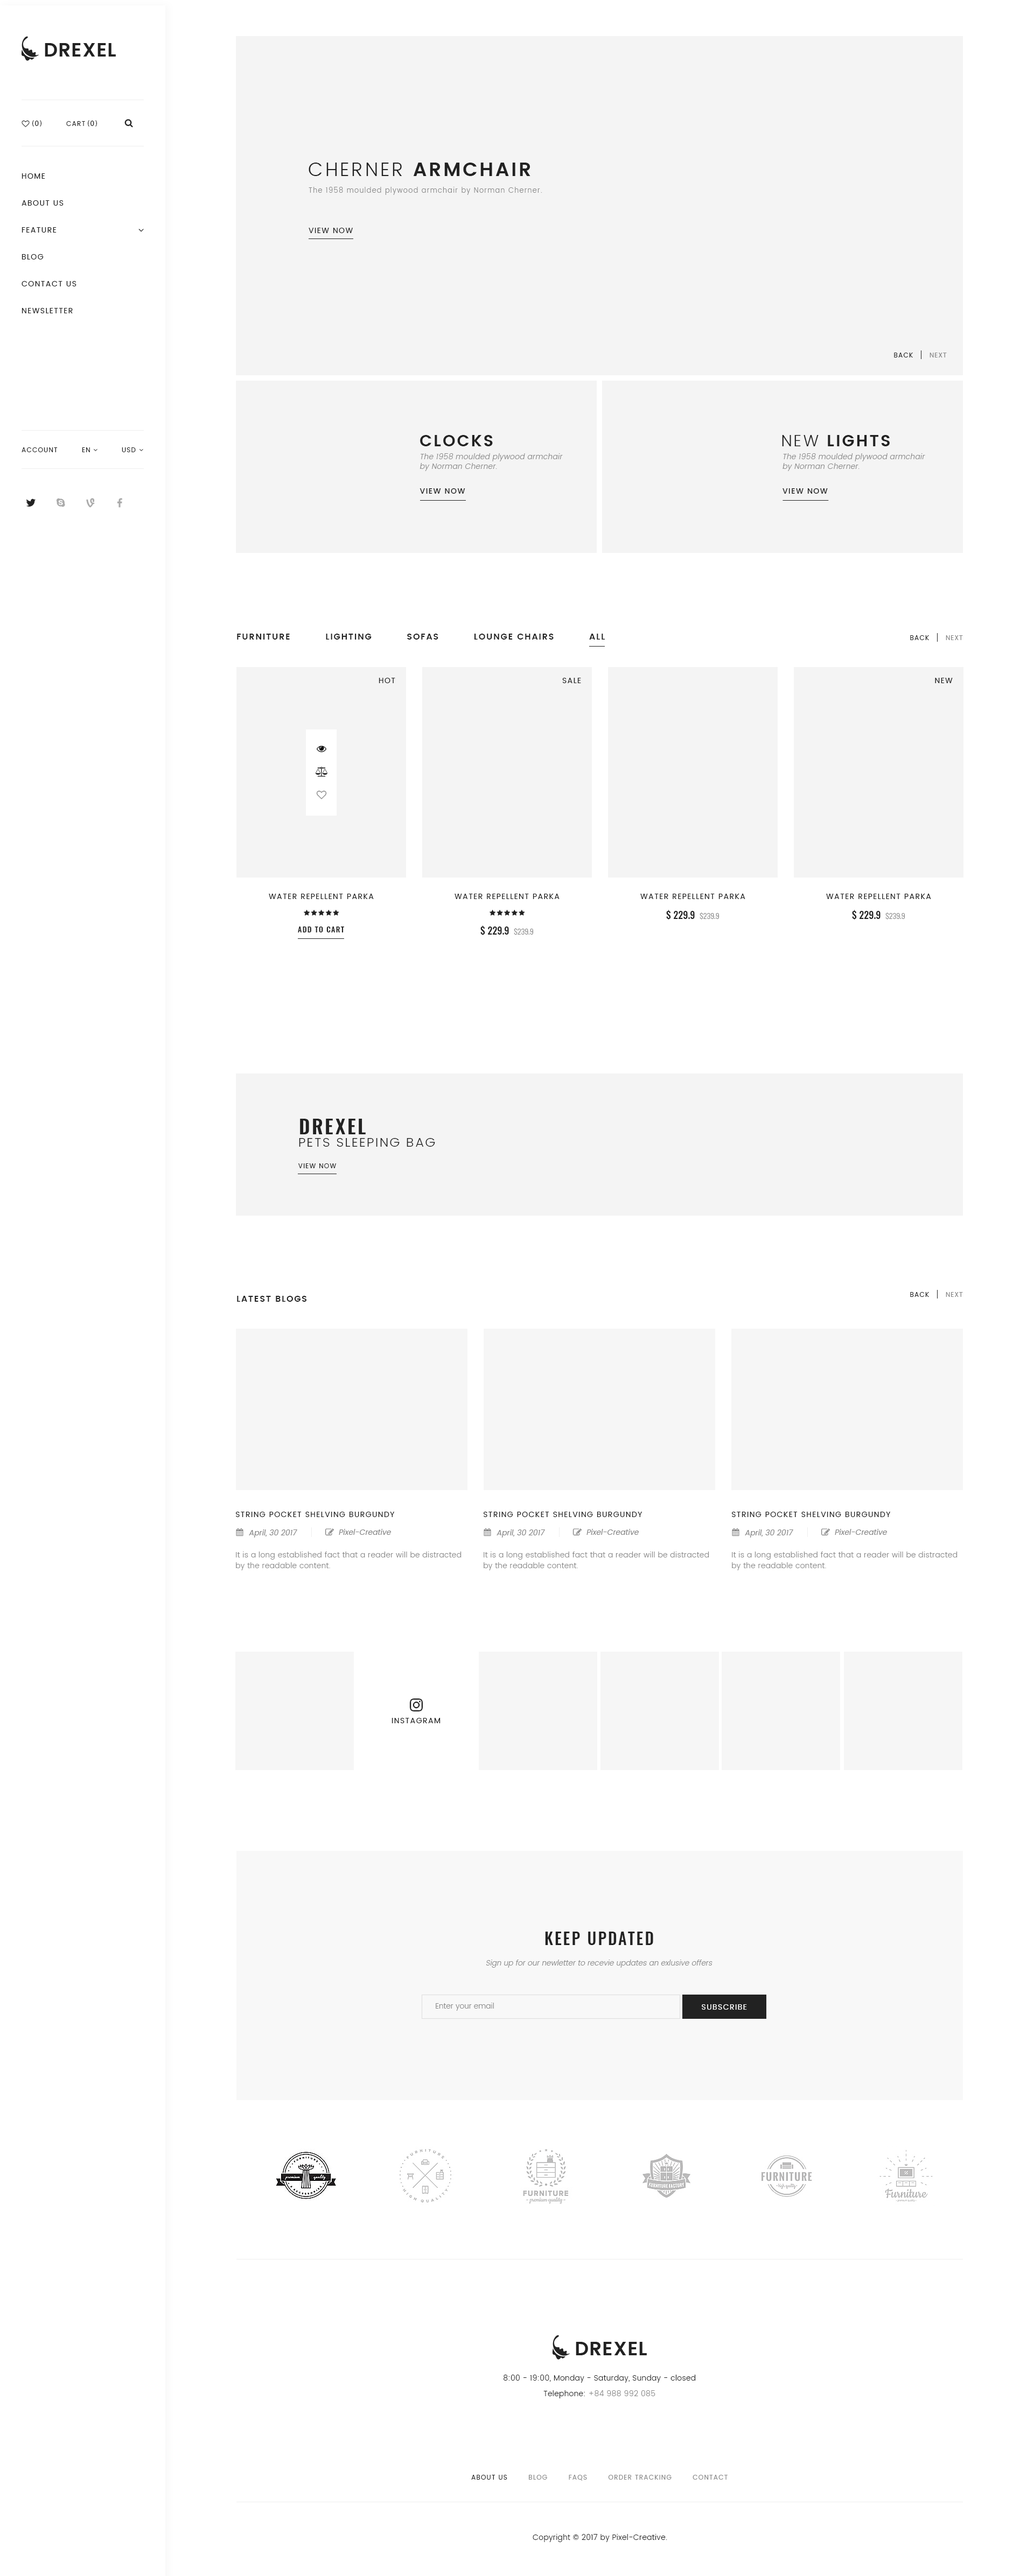
<style>
.page{position:relative;width:1034px;height:2576px;background:#ffffff}
.page>*{position:absolute;margin:0}
.t1{font:7.5px "MyriadPro-Regular";letter-spacing:0.1em;color:#222222;text-transform:uppercase}
.t2{font:6.5px "Poppins-Regular";letter-spacing:0.1em;color:#222222;text-transform:uppercase}
.t3{font:7.5px/26.9px "Poppins-Regular";letter-spacing:0.1em;color:#222222;text-transform:uppercase}
.t4{font:19.4px "Poppins-SemiBold";letter-spacing:0.1em;color:#222222;text-transform:uppercase}
.t5{font:19.4px "Poppins-Light";letter-spacing:0.1em;color:#222222;text-transform:uppercase}
.t6{font:7px "Poppins-Light";letter-spacing:0.1em;color:#888888}
.t7{font:7.5px "Poppins-Regular";letter-spacing:0.1em;color:#222222;text-transform:uppercase}
.t8{font:6.5px "MyriadPro-Regular";letter-spacing:0.1em;color:#888888;text-transform:uppercase}
.t9{font:6.5px "Poppins-Regular";letter-spacing:0.1em;color:#888888;text-transform:uppercase}
.t10{font:16.2px "Poppins-SemiBold";letter-spacing:0.1em;color:#222222;text-transform:uppercase}
.t11{font:16.2px "Poppins-Light";letter-spacing:0.1em;color:#222222;text-transform:uppercase}
.t12{font:6.5px "Poppins-Regular";letter-spacing:0.1em;color:#222222}
.t13{font:7.5px/9.7px "Poppins-Light";letter-spacing:0.025em;color:#888888;font-style:italic}
.t14{font:7.5px "Poppins-Medium";letter-spacing:0.1em;color:#222222;text-transform:uppercase}
.t15{font:8.6px "Poppins-SemiBold";letter-spacing:0.1em;color:#222222;text-transform:uppercase}
.t16{font:9.7px "Oswald-Medium";color:#222222}
.t17{font:7.5px "Oswald-Light";color:#888888}
.t18{font:7.5px "Oswald-Medium";letter-spacing:0.1em;color:#222222;text-transform:uppercase}
.t19{font:19.4px "Oswald-DemiBold";letter-spacing:0.1em;color:#222222;text-transform:uppercase}
.t20{font:12.9px "Poppins-Light";letter-spacing:0.1em;color:#222222;text-transform:uppercase}
.t21{font:7.5px "Poppins-Regular";color:#888888;font-style:italic}
.t22{font:7.5px/10.8px "Poppins-Light";letter-spacing:0.025em;color:#888888}
.t23{font:16.2px "Oswald-Medium";letter-spacing:0.1em;color:#222222}
.t24{font:7.5px "Poppins-Light";color:#888888;font-style:italic}
.t25{font:7.5px "Poppins-Light";color:#888888}
.t26{font:7.5px "Poppins-Regular";letter-spacing:0.1em;color:#ffffff;text-transform:uppercase}
.t27{font:7.5px "Poppins-Light";letter-spacing:0.025em;color:#222222}
.t28{font:7.5px "Poppins-Light";letter-spacing:0.025em;color:#888888}
</style>
<div class="page">
<p class="t1" style="left:32px;top:120px;width:9px;height:7px">(0)</p>
<p class="t2" style="left:66px;top:121px;width:19px;height:5px">Cart</p>
<p class="t1" style="left:88px;top:120px;width:9px;height:7px">(0)</p>
<p class="t3" style="left:22px;top:173px;width:54px;height:140px">Home<br>about us<br>Feature<br>Blog<br>contact us<br>newsletter</p>
<p class="t4" style="left:308px;top:163px;width:222px;height:13px"><span class="t5">Cherner </span>Armchair</p>
<p class="t6" style="left:308px;top:187px;width:234px;height:8px">The 1958 moulded plywood armchair by Norman Cherner.</p>
<p class="t7" style="left:308px;top:228px;width:45px;height:5px">View now</p>
<p class="t2" style="left:894px;top:353px;width:19px;height:4px">Back</p>
<p class="t8" style="left:929px;top:353px;width:17px;height:4px"><span class="t9">N</span>ext</p>
<p class="t10" style="left:420px;top:435px;width:73px;height:11px">Clocks</p>
<p class="t10" style="left:782px;top:435px;width:107px;height:11px"><span class="t11">New</span> Lights</p>
<p class="t2" style="left:22px;top:447px;width:36px;height:5px">Account</p>
<p class="t12" style="left:82px;top:447px;width:8px;height:5px">EN</p>
<p class="t12" style="left:122px;top:447px;width:14px;height:5px">USD</p>
<p class="t13" style="left:419px;top:453px;width:144px;height:18px">The 1958 moulded plywood armchair<br>by Norman Cherner.</p>
<p class="t13" style="left:782px;top:453px;width:143px;height:18px">The 1958 moulded plywood armchair<br>by Norman Cherner.</p>
<p class="t14" style="left:419px;top:488px;width:46px;height:6px">View now</p>
<p class="t14" style="left:782px;top:488px;width:45px;height:6px">View now</p>
<p class="t15" style="left:237px;top:634px;width:368px;height:6px">Furniture          Lighting          Sofas          Lounge Chairs          All</p>
<p class="t2" style="left:910px;top:635px;width:19px;height:5px">Back</p>
<p class="t8" style="left:945px;top:635px;width:18px;height:5px"><span class="t9">N</span>ext</p>
<p class="t7" style="left:378px;top:678px;width:17px;height:5px">Hot</p>
<p class="t7" style="left:562px;top:678px;width:19px;height:5px">SAle</p>
<p class="t7" style="left:935px;top:678px;width:17px;height:5px">New</p>
<p class="t7" style="left:269px;top:894px;width:105px;height:5px">Water Repellent Parka</p>
<p class="t7" style="left:454px;top:894px;width:105px;height:5px">Water Repellent Parka</p>
<p class="t7" style="left:640px;top:894px;width:105px;height:5px">Water Repellent Parka</p>
<p class="t7" style="left:826px;top:894px;width:105px;height:5px">Water Repellent Parka</p>
<p class="t16" style="left:666px;top:910px;width:53px;height:10px">$ 229.9  <span class="t17">$239.9</span></p>
<p class="t16" style="left:852px;top:910px;width:53px;height:10px">$ 229.9  <span class="t17">$239.9</span></p>
<p class="t18" style="left:298px;top:926px;width:46px;height:6px">Add to cart</p>
<p class="t16" style="left:480px;top:925px;width:54px;height:11px">$ 229.9  <span class="t17">$239.9</span></p>
<p class="t19" style="left:300px;top:1119px;width:66px;height:15px">Drexel</p>
<p class="t20" style="left:299px;top:1138px;width:136px;height:9px">Pets Sleeping bag</p>
<p class="t2" style="left:298px;top:1163px;width:38px;height:5px">View now</p>
<p class="t15" style="left:237px;top:1296px;width:69px;height:6px">Latest Blogs</p>
<p class="t2" style="left:910px;top:1292px;width:19px;height:5px">Back</p>
<p class="t8" style="left:945px;top:1292px;width:18px;height:5px"><span class="t9">N</span>ext</p>
<p class="t7" style="left:236px;top:1512px;width:159px;height:5px">String Pocket Shelving Burgundy</p>
<p class="t7" style="left:483px;top:1512px;width:159px;height:5px">String Pocket Shelving Burgundy</p>
<p class="t7" style="left:732px;top:1512px;width:158px;height:5px">String Pocket Shelving Burgundy</p>
<p class="t21" style="left:249px;top:1529px;width:48px;height:9px">April, 30 2017</p>
<p class="t21" style="left:339px;top:1529px;width:52px;height:6px">Pixel-Creative</p>
<p class="t21" style="left:496px;top:1529px;width:49px;height:9px">April, 30 2017</p>
<p class="t21" style="left:586px;top:1529px;width:52px;height:6px">Pixel-Creative</p>
<p class="t21" style="left:745px;top:1529px;width:48px;height:9px">April, 30 2017</p>
<p class="t21" style="left:834px;top:1529px;width:53px;height:6px">Pixel-Creative</p>
<p class="t22" style="left:236px;top:1552px;width:225px;height:18px">It is a long established fact that a reader will be distracted by the readable content.</p>
<p class="t22" style="left:483px;top:1552px;width:226px;height:18px">It is a long established fact that a reader will be distracted by the readable content.</p>
<p class="t22" style="left:732px;top:1552px;width:225px;height:18px">It is a long established fact that a reader will be distracted by the readable content.</p>
<p class="t7" style="left:391px;top:1718px;width:49px;height:5px">Instagram</p>
<p class="t23" style="left:545px;top:1932px;width:108px;height:13px">KEEP UPDATED</p>
<p class="t24" style="left:486px;top:1960px;width:226px;height:8px">Sign up for our newletter to recevie updates an exlusive offers</p>
<p class="t25" style="left:436px;top:2003px;width:58px;height:8px">Enter your email</p>
<p class="t26" style="left:701px;top:2004px;width:46px;height:6px">Subscribe</p>
<p class="t27" style="left:503px;top:2375px;width:193px;height:8px">8:00 - 19:00, Monday - Saturday, Sunday - closed</p>
<p class="t28" style="left:543px;top:2390px;width:112px;height:8px"><span class="t27">Telephone: </span>+84 988 992 085</p>
<p class="t9" style="left:471px;top:2475px;width:256px;height:6px"><span class="t2">About Us</span>        Blog        FAQs        Order Tracking        Contact</p>
<p class="t27" style="left:532px;top:2534px;width:135px;height:8px">Copyright © 2017 by Pixel-Creative.</p>
</div>
